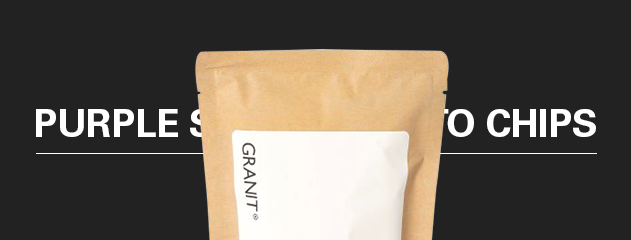
<style>
.page{position:relative;width:631px;height:240px;background:#222222}
.page>*{position:absolute;margin:0}
.t1{font:38px "UniversLTStd-Bold";letter-spacing:-0.005em;color:#ffffff}
</style>
<div class="page">
<p class="t1" style="left:36px;top:109px;width:560px;height:28px">PURPLE SWEET POTATO CHIPS</p>
</div>
